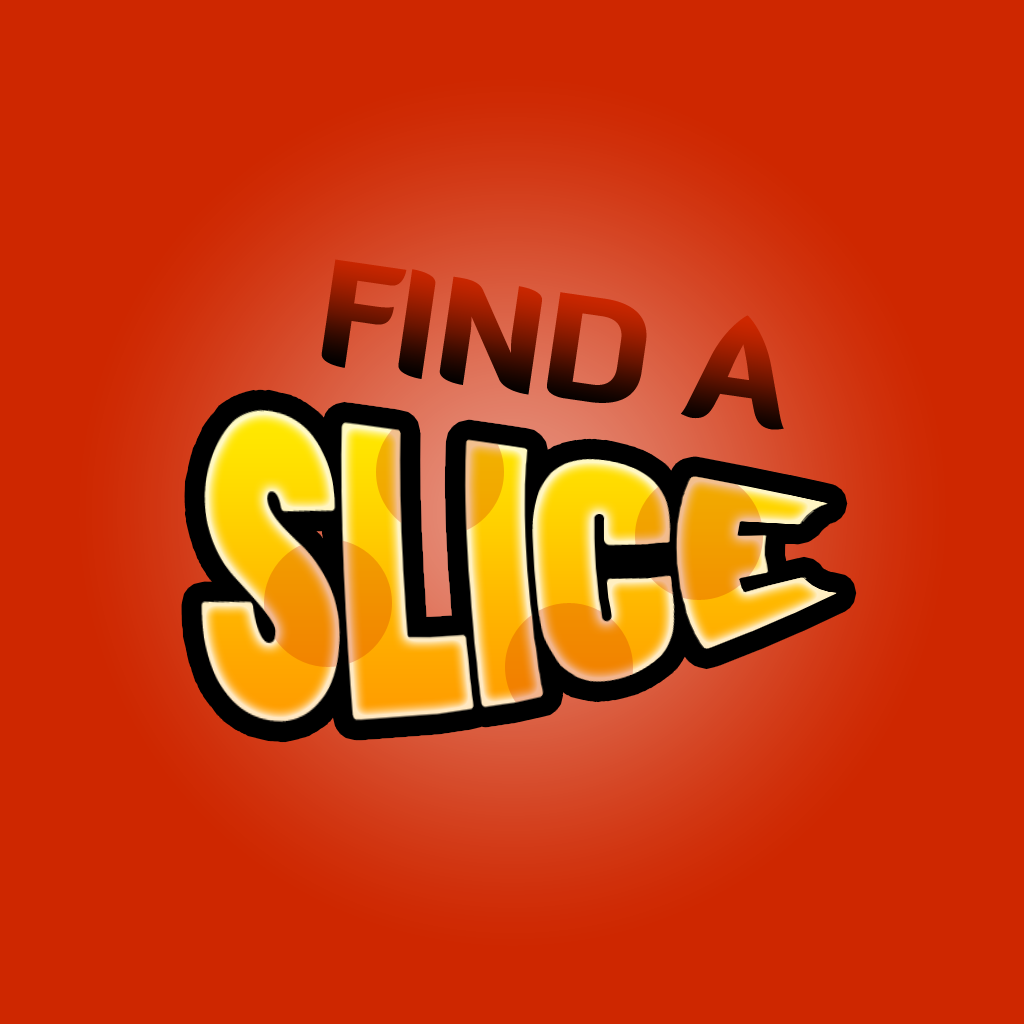
<style>
.page{position:relative;width:1024px;height:1024px;background:#ce2700}
.page>*{position:absolute;margin:0}
.t1{font:143.3px "DiavloBlack-Regular";letter-spacing:-0.01em}
</style>
<div class="page">
<p class="t1" style="left:321px;top:259px;width:463px;height:171px;rotate:8deg">FIND A</p>
</div>
